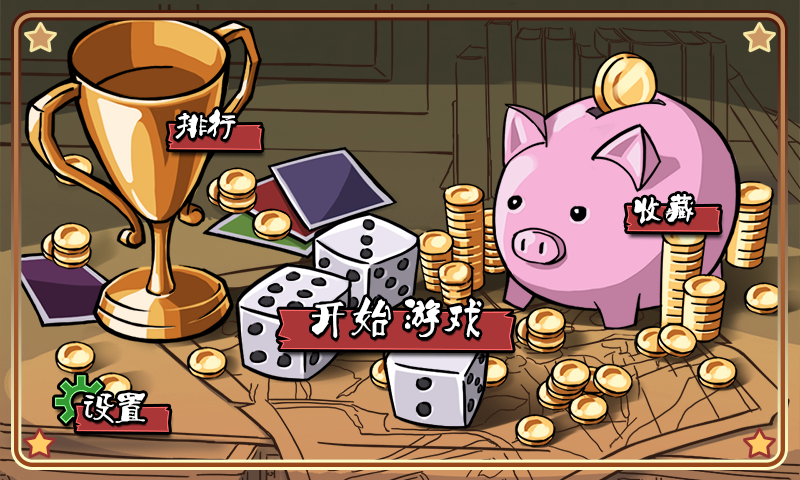
<style>
.page{position:relative;width:800px;height:480px}
.page>*{position:absolute;margin:0}
.t1{font:30px "Ò¶¸ùÓÑÌØÉ«¼òÌåÉý¼¶°æ";letter-spacing:0.05em;color:#ffffff}
.t2{font:37.5px "Ò¶¸ùÓÑÌØÉ«¼òÌåÉý¼¶°æ";letter-spacing:0.05em;color:#ffffff}
.t3{font:40.6px "Ò¶¸ùÓÑÌØÉ«¼òÌåÉý¼¶°æ";letter-spacing:0.05em;color:#ffffff}
</style>
<div class="page">
<p class="t1" style="left:175px;top:109px;width:61px;height:30px">排行</p>
<p class="t1" style="left:634px;top:194px;width:60px;height:30px">收藏</p>
<p class="t2" style="left:312px;top:297px;width:170px;height:41px"><span class="t3">开</span>始 游戏</p>
<p class="t1" style="left:84px;top:392px;width:61px;height:31px">设置</p>
</div>
